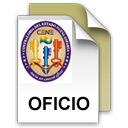
<style>
.page{position:relative;width:128px;height:128px;background:#ffffff}
.page>*{position:absolute;margin:0}
.t1{font:18px "Arial-BoldMT";color:#010101}
</style>
<div class="page">
<p class="t1" style="left:28px;top:96px;width:62px;height:15px">OFICIO</p>
</div>
